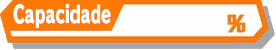
<style>
.page{position:relative;width:276px;height:50px;background:#fffeff}
.page>*{position:absolute;margin:0}
.t1{font:24px "RodinPro-EB";color:#ffffff;scale:0.67 1}
</style>
<div class="page">
<p class="t1" style="left:13px;top:3px;width:98px;height:25px">Capacidade</p>
</div>
